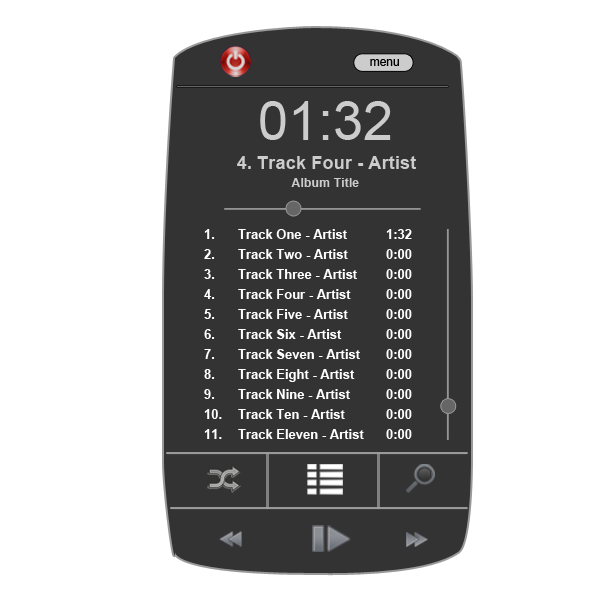
<style>
.page{position:relative;width:600px;height:600px;background:#ffffff}
.page>*{position:absolute;margin:0}
.t1{font:11.9px "ArialMT";color:#000000}
.t2{font:53.9px "ArialMT";color:#cccccc}
.t3{font:18.4px "Arial-BoldMT";color:#cccccc}
.t4{font:12.4px "Arial-BoldMT";color:#cccccc}
.t5{font:13px/20px "Arial-BoldMT";color:#ffffff}
</style>
<div class="page">
<p class="t1" style="left:370px;top:59px;width:29px;height:7px">menu</p>
<p class="t2" style="left:260px;top:101px;width:131px;height:39px">01:32</p>
<p class="t3" style="left:237px;top:156px;width:179px;height:13px">4. Track Four - Artist</p>
<p class="t4" style="left:291px;top:178px;width:68px;height:9px">Album Title</p>
<p class="t5" style="left:204px;top:229px;width:18px;height:210px">1.<br>2.<br>3. <br>4. <br>5. <br>6. <br>7. <br>8. <br>9. <br>10. <br>11.</p>
<p class="t5" style="left:238px;top:229px;width:126px;height:210px">Track One - Artist<br>Track Two - Artist<br>Track Three - Artist<br>Track Four - Artist<br>Track Five - Artist<br>Track Six - Artist<br>Track Seven - Artist<br>Track Eight - Artist<br>Track Nine - Artist<br>Track Ten - Artist<br>Track Eleven - Artist</p>
<p class="t5" style="left:386px;top:229px;width:26px;height:210px">1:32<br>0:00<br>0:00<br>0:00<br>0:00<br>0:00<br>0:00<br>0:00<br>0:00<br>0:00<br>0:00</p>
</div>
